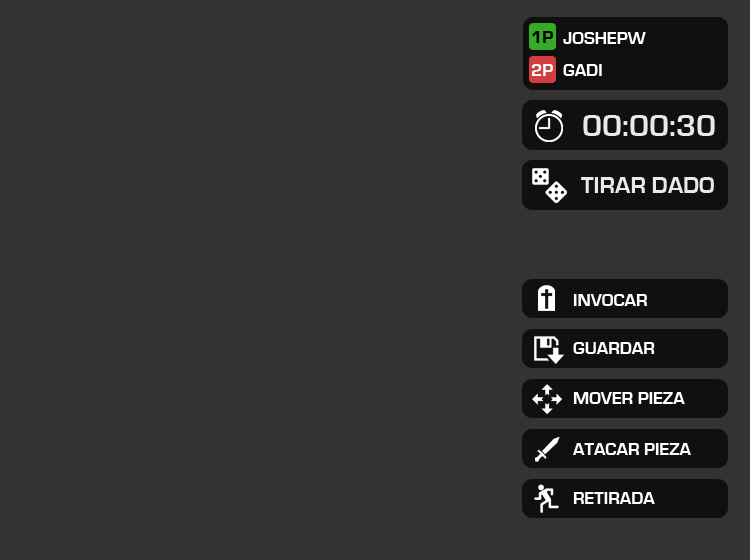
<style>
.page{position:relative;width:750px;height:560px;background:#333333}
.page>*{position:absolute;margin:0}
.t1{font:18px "EurostileBold";color:#000000}
.t2{font:18px "EurostileBold";color:#ffffff}
.t3{font:32px "EurostileBold";color:#e9e9e9}
.t4{font:24px "EurostileBold";color:#e9e9e9}
</style>
<div class="page">
<p class="t1" style="left:532px;top:31px;width:21px;height:12px">1P</p>
<p class="t2" style="left:563px;top:32px;width:83px;height:12px">JOSHEPW</p>
<p class="t2" style="left:531px;top:64px;width:22px;height:12px">2P</p>
<p class="t2" style="left:563px;top:64px;width:39px;height:12px">GADI</p>
<p class="t3" style="left:583px;top:115px;width:132px;height:21px">00:00:30</p>
<p class="t4" style="left:581px;top:177px;width:133px;height:16px">TIRAR DADO</p>
<p class="t2" style="left:573px;top:294px;width:74px;height:12px">INVOCAR</p>
<p class="t2" style="left:573px;top:342px;width:82px;height:12px">GUARDAR</p>
<p class="t2" style="left:573px;top:392px;width:112px;height:12px">MOVER PIEZA</p>
<p class="t2" style="left:573px;top:443px;width:118px;height:12px">ATACAR PIEZA</p>
<p class="t2" style="left:573px;top:492px;width:82px;height:12px">RETIRADA</p>
</div>
